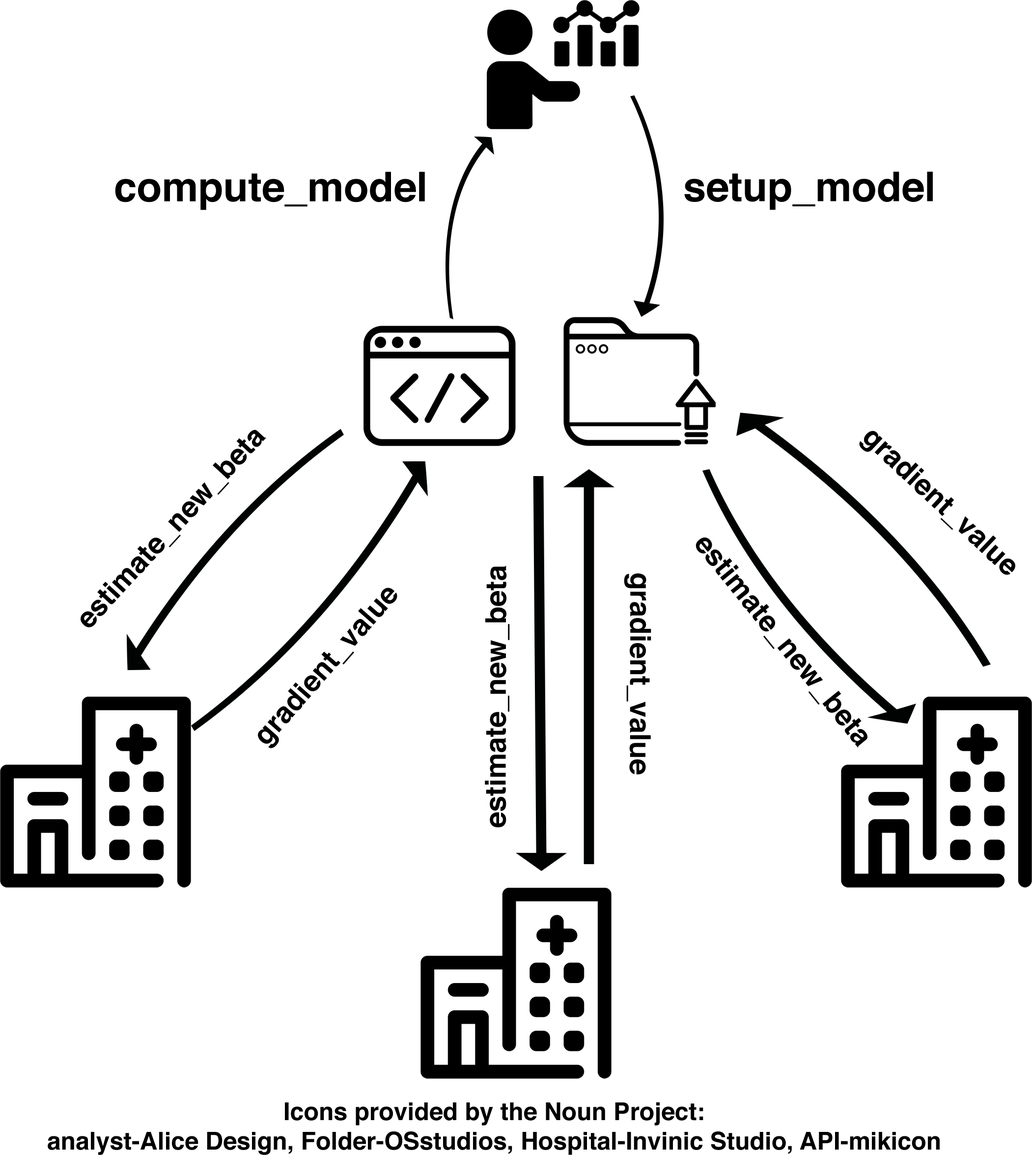
<style>
.page{position:relative;width:1032px;height:1155px;background:#ffffff}
.page>*{position:absolute;margin:0}
.t1{font:40.9px "Helvetica-Bold";color:#000000}
.t2{font:28.6px "Helvetica-Bold";color:#000000}
.t3{font:28.7px "Helvetica-Bold";color:#000000}
.t4{font:24.6px "Helvetica-Bold";color:#000000}
</style>
<div class="page">
<p class="t1" style="left:115px;top:171px;width:310px;height:39px">compute_model</p>
<p class="t1" style="left:684px;top:171px;width:249px;height:39px">setup_model</p>
<p class="t2" style="left:81px;top:430px;width:185px;height:197px;rotate:-47deg">estimate_new_beta</p>
<p class="t3" style="left:859px;top:431px;width:157px;height:144px;rotate:43deg">gradient_value</p>
<p class="t3" style="left:696px;top:538px;width:172px;height:210px;rotate:51deg">estimate_new_beta</p>
<p class="t3" style="left:485px;top:566px;width:25px;height:261px;rotate:-90deg">estimate_new_beta</p>
<p class="t3" style="left:624px;top:573px;width:28px;height:202px;rotate:90deg">gradient_value</p>
<p class="t3" style="left:258px;top:588px;width:139px;height:160px;rotate:-49deg">gradient_value</p>
<p class="t4" style="left:48px;top:1102px;width:892px;height:53px;text-align:center">Icons provided by the Noun Project:<br>analyst-Alice Design, Folder-OSstudios, Hospital-Invinic Studio, API-mikicon</p>
</div>
